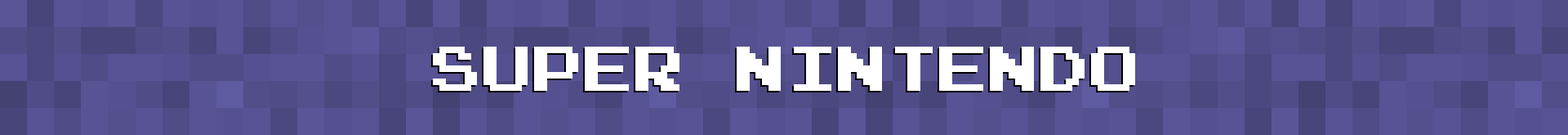
<style>
.page{position:relative;width:1568px;height:135px;background:#575394}
.page>*{position:absolute;margin:0}
.t1{font:50.6px "PressStart2P";color:#ffffff}
</style>
<div class="page">
<p class="t1" style="left:433px;top:47px;width:702px;height:44px">SUPER NINTENDO</p>
</div>
